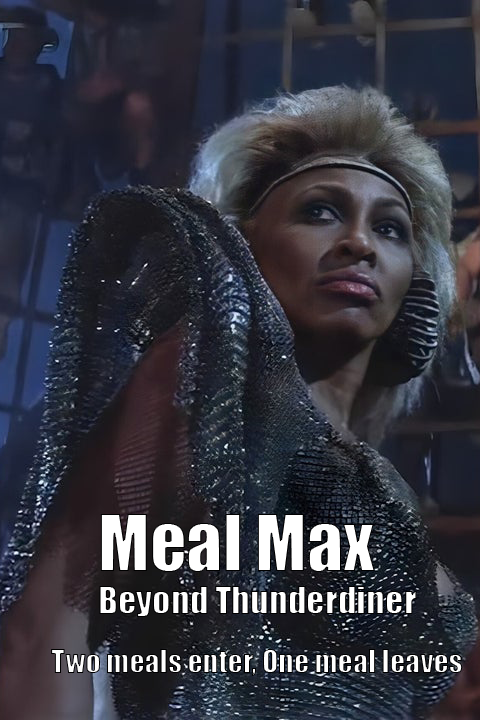
<style>
.page{position:relative;width:480px;height:720px}
.page>*{position:absolute;margin:0}
.t1{font:36px "Impact";color:#ffffff}
.t2{font:72px "Impact";color:#ffffff}
.t3{font:30px "Impact"}
</style>
<div class="page">
<p class="t1" style="left:99px;top:514px;width:318px;height:103px"><span class="t2">Meal Max<br></span>Beyond Thunderdiner</p>
<p class="t3" style="left:51px;top:649px;width:412px;height:27px">Two meals enter, One meal leaves</p>
</div>
